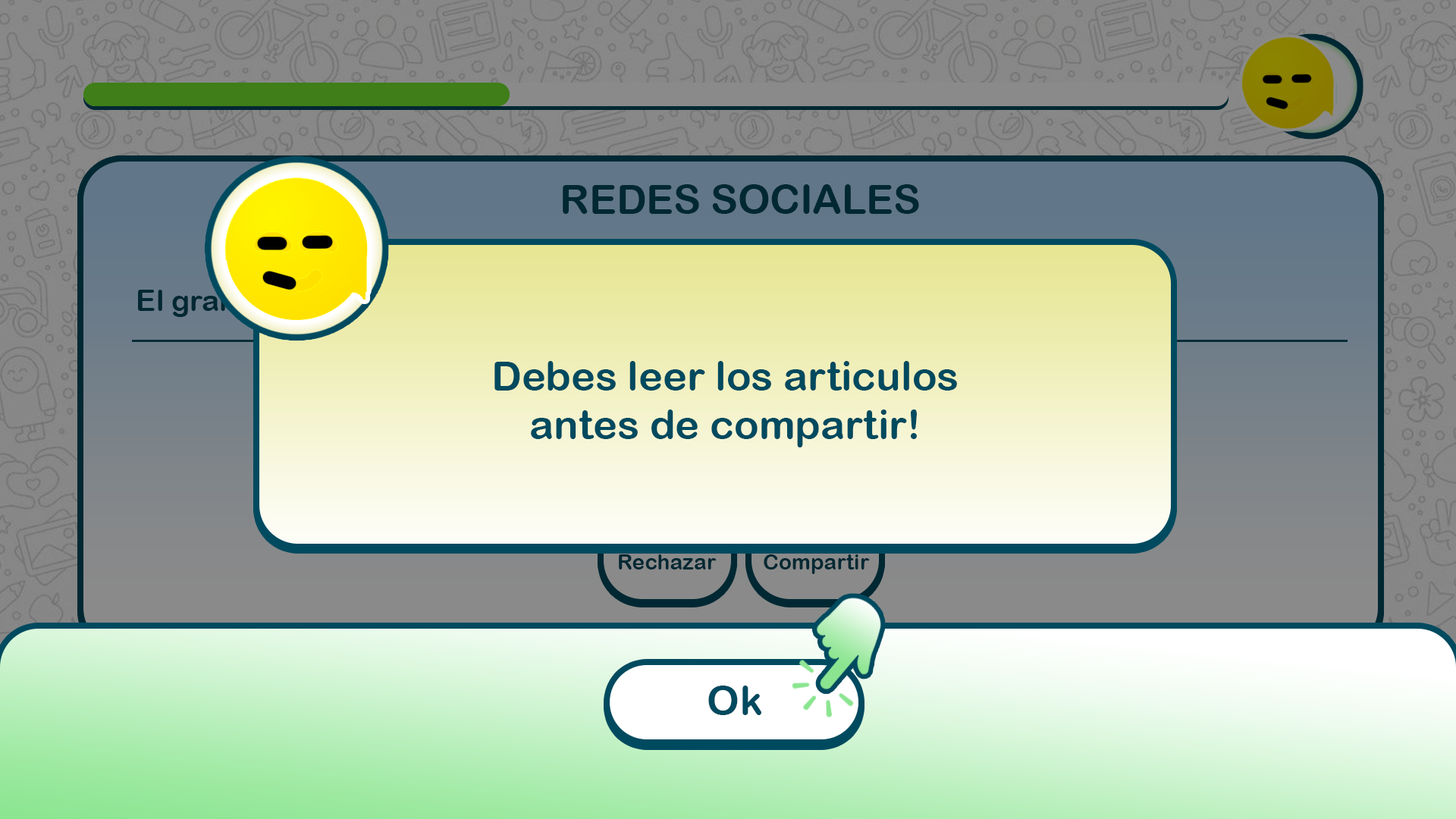
<style>
.page{position:relative;width:1456px;height:819px}
.page>*{position:absolute;margin:0}
.t1{font:40.6px "ArialRoundedMTBold";color:#002833}
.t2{font:40.9px "ArialRoundedMTBold";color:#004a5f}
.t3{font:21.4px "ArialRoundedMTBold";color:#002833}
</style>
<div class="page">
<p class="t1" style="left:563px;top:184px;width:356px;height:30px">REDES SOCIALES</p>
<p class="t2" style="left:494px;top:361px;width:463px;height:86px;text-align:center">Debes leer los articulos<br>antes de compartir!</p>
<p class="t3" style="left:619px;top:554px;width:98px;height:16px">Rechazar</p>
<p class="t3" style="left:764px;top:554px;width:106px;height:20px">Compartir</p>
<p class="t2" style="left:708px;top:686px;width:53px;height:29px">Ok</p>
</div>
